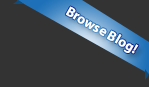
<style>
.page{position:relative;width:149px;height:87px;background:#333333}
.page>*{position:absolute;margin:0}
.t1{font:13.8px "MyriadPro-Bold";color:#ffffff}
</style>
<div class="page">
<p class="t1" style="left:65px;top:6px;width:74px;height:48px;rotate:30deg">Browse Blog!</p>
</div>
